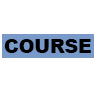
<style>
.page{position:relative;width:96px;height:96px;background:#ffffff}
.page>*{position:absolute;margin:0}
.t1{font:18.8px "Arial-Black";color:#000000}
</style>
<div class="page">
<p class="t1" style="left:4px;top:39px;width:87px;height:14px">COURSE</p>
</div>
